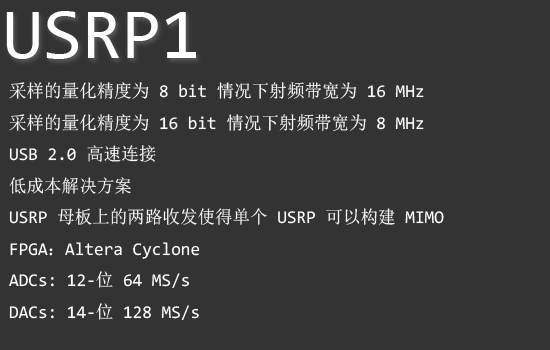
<style>
.page{position:relative;width:550px;height:350px;background:#333333}
.page>*{position:absolute;margin:0}
.t1{font:72px "Consolas";color:#ffffff}
.t2{font:18px "Consolas";color:#ffffff}
.t3{font:18px "SimSun";color:#ffffff}
</style>
<div class="page">
<p class="t1" style="left:6px;top:11px;width:190px;height:48px">USRP1</p>
<p class="t2" style="left:9px;top:82px;width:435px;height:239px"><span class="t3">采样的量化精度为</span> 8 bit <span class="t3">情况下射频带宽为</span> 16 MHz<br><span class="t3">采样的量化精度为</span> 16 bit <span class="t3">情况下射频带宽为</span> 8 MHz<br>USB 2.0 <span class="t3">高速连接<br>低成本解决方案</span><br>USRP <span class="t3">母板上的两路收发使得单个</span> USRP <span class="t3">可以构建</span> MIMO<br>FPGA<span class="t3">：</span>Altera Cyclone<br>ADCs: 12-<span class="t3">位</span> 64 MS/s<br>DACs: 14-<span class="t3">位</span> 128 MS/s</p>
</div>
